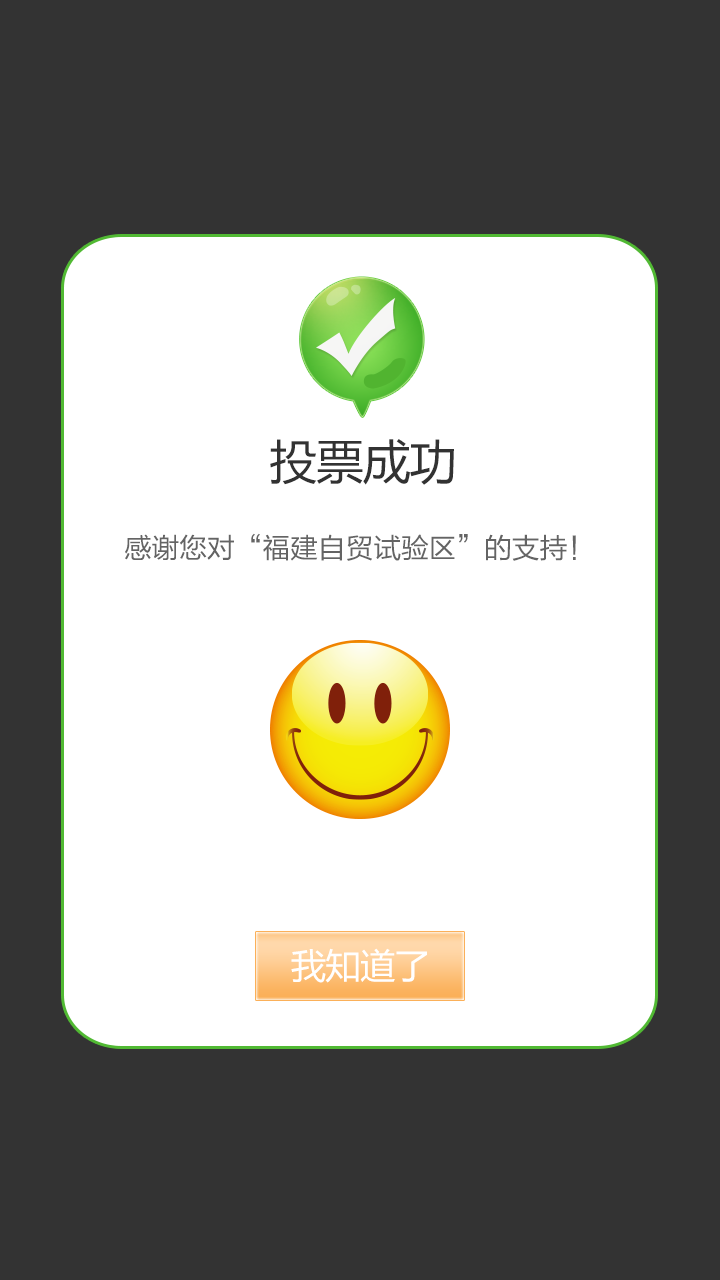
<style>
.page{position:relative;width:720px;height:1280px;background:#333333}
.page>*{position:absolute;margin:0}
.t1{font:47.2px "MicrosoftYaHei";letter-spacing:-0.01em;color:#323232}
.t2{font:28px "FZLTHK--GBK1-0";letter-spacing:-0.01em;color:#646464}
.t3{font:35px "MicrosoftYaHei";letter-spacing:-0.01em;color:#ffffff}
</style>
<div class="page">
<p class="t1" style="left:270px;top:439px;width:184px;height:46px">投票成功</p>
<p class="t2" style="left:125px;top:533px;width:451px;height:28px">感谢您对“福建自贸试验区”的支持！</p>
<p class="t3" style="left:291px;top:948px;width:136px;height:35px">我知道了</p>
</div>
